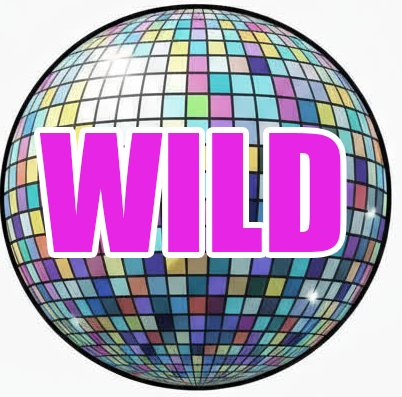
<style>
.page{position:relative;width:402px;height:397px}
.page>*{position:absolute;margin:0}
.t1{font:150px "Impact";color:#e726e5}
</style>
<div class="page">
<p class="t1" style="left:40px;top:133px;width:301px;height:119px">WILD</p>
</div>
